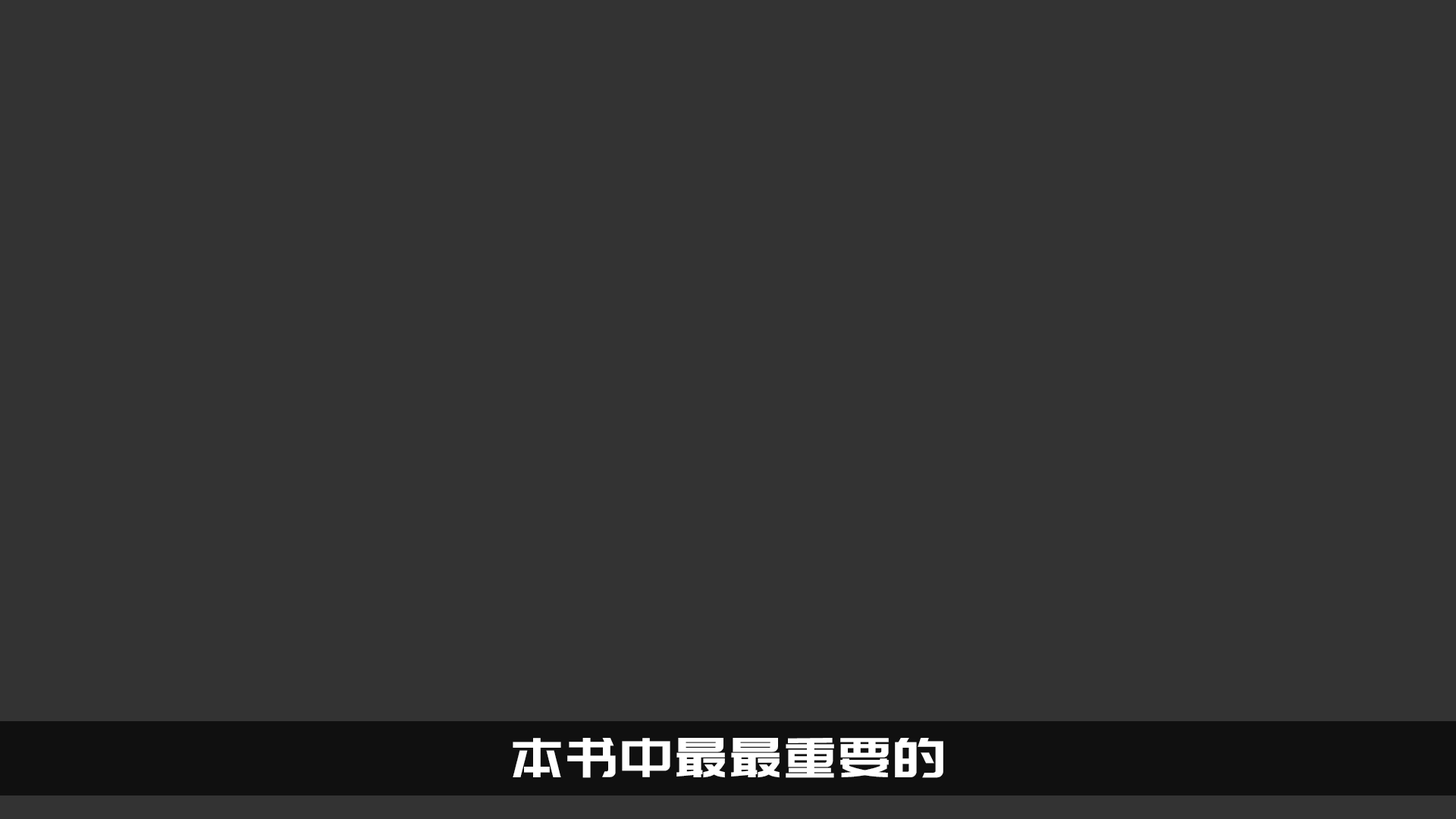
<style>
.page{position:relative;width:1456px;height:819px;background:#333333}
.page>*{position:absolute;margin:0}
.t1{font:54.6px "PangMenZhengDao-3";color:#ffffff}
</style>
<div class="page">
<p class="t1" style="left:513px;top:738px;width:430px;height:40px">本书中最最重要的</p>
</div>
